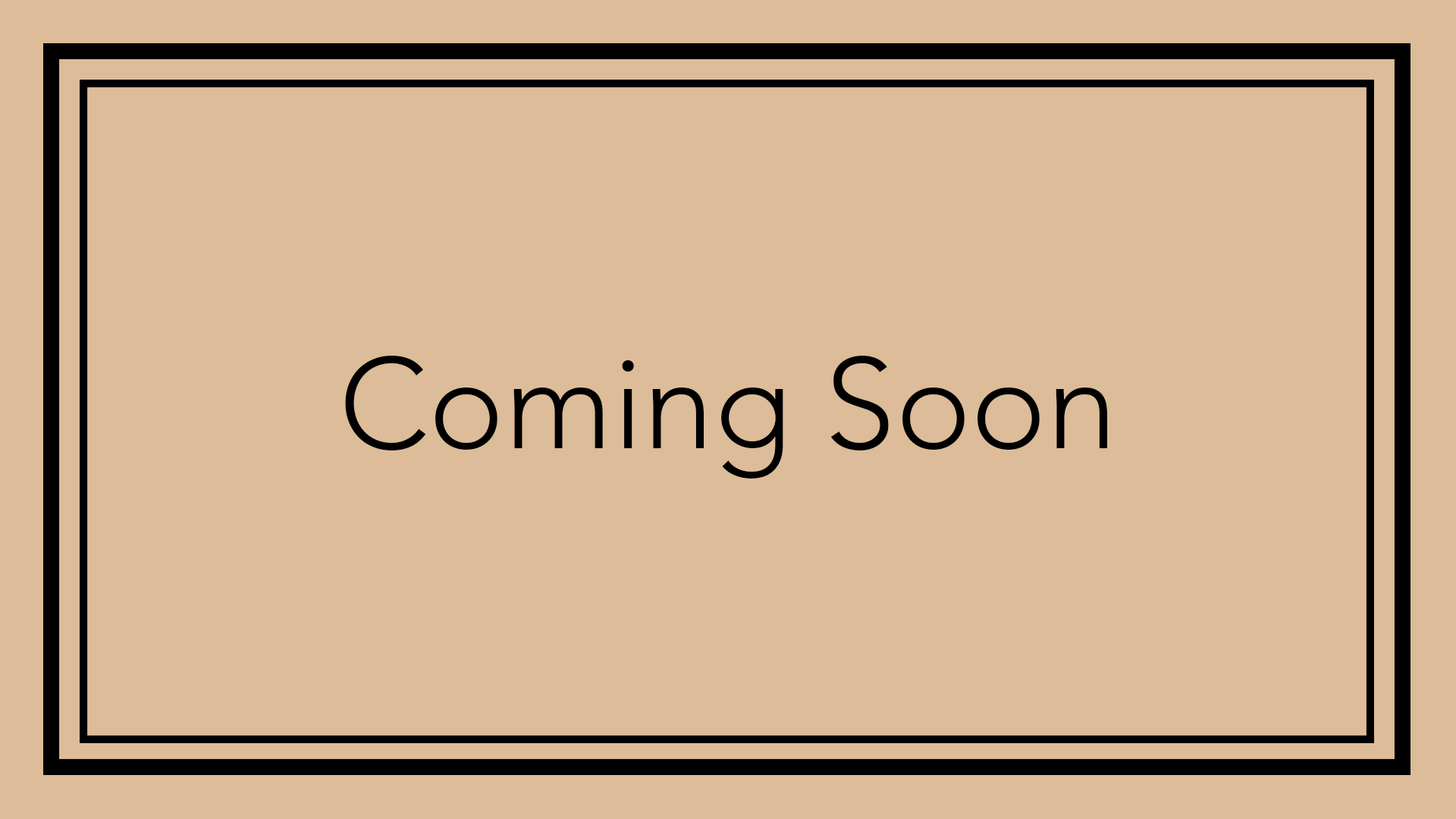
<style>
.page{position:relative;width:1456px;height:819px;background:#dcbc99}
.page>*{position:absolute;margin:0}
.t1{font:127.2px "Avenir-Light";color:#000000}
</style>
<div class="page">
<p class="t1" style="left:345px;top:356px;width:762px;height:123px">Coming Soon</p>
</div>
